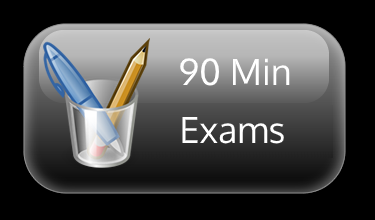
<style>
.page{position:relative;width:375px;height:220px;background:#000000}
.page>*{position:absolute;margin:0}
.t1{font:36px "Oxygen-Regular";color:#ffffff}
</style>
<div class="page">
<p class="t1" style="left:180px;top:58px;width:110px;height:28px">90 Min</p>
<p class="t1" style="left:182px;top:117px;width:102px;height:27px">Exams</p>
</div>
